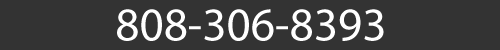
<style>
.page{position:relative;width:500px;height:50px;background:#333333}
.page>*{position:absolute;margin:0}
.t1{font:47.2px "MyriadPro-Regular";color:#ffffff}
</style>
<div class="page">
<p class="t1" style="left:117px;top:9px;width:267px;height:32px">808-306-8393</p>
</div>
